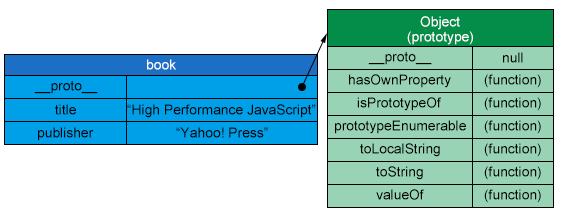
<style>
.page{position:relative;width:566px;height:218px;background:#ffffff}
.page>*{position:absolute;margin:0}
.t1{font:13.8px "ArialMT";color:#fffefe}
.t2{font:13.8px "ArialMT";color:#000000}
</style>
<div class="page">
<p class="t1" style="left:420px;top:16px;width:40px;height:14px">Object</p>
<p class="t1" style="left:407px;top:31px;width:66px;height:14px">(prototype)</p>
<p class="t2" style="left:368px;top:51px;width:64px;height:14px">__proto__</p>
<p class="t2" style="left:503px;top:52px;width:20px;height:11px">null</p>
<p class="t1" style="left:147px;top:59px;width:29px;height:11px">book</p>
<p class="t2" style="left:349px;top:74px;width:102px;height:14px">hasOwnProperty</p>
<p class="t2" style="left:484px;top:74px;width:57px;height:14px">(function)</p>
<p class="t2" style="left:34px;top:80px;width:64px;height:14px">__proto__</p>
<p class="t2" style="left:357px;top:97px;width:84px;height:14px">isPrototypeOf</p>
<p class="t2" style="left:484px;top:97px;width:57px;height:14px">(function)</p>
<p class="t2" style="left:55px;top:104px;width:21px;height:11px">title</p>
<p class="t2" style="left:127px;top:104px;width:189px;height:14px">“High Performance JavaScript”</p>
<p class="t2" style="left:335px;top:120px;width:131px;height:14px">prototypeEnumerable</p>
<p class="t2" style="left:484px;top:120px;width:57px;height:14px">(function)</p>
<p class="t2" style="left:38px;top:127px;width:56px;height:14px">publisher</p>
<p class="t2" style="left:176px;top:127px;width:92px;height:11px">“Yahoo! Press”</p>
<p class="t2" style="left:360px;top:143px;width:80px;height:14px">toLocalString</p>
<p class="t2" style="left:484px;top:143px;width:57px;height:14px">(function)</p>
<p class="t2" style="left:376px;top:166px;width:47px;height:14px">toString</p>
<p class="t2" style="left:484px;top:166px;width:57px;height:14px">(function)</p>
<p class="t2" style="left:376px;top:189px;width:48px;height:11px">valueOf</p>
<p class="t2" style="left:484px;top:189px;width:57px;height:14px">(function)</p>
</div>
